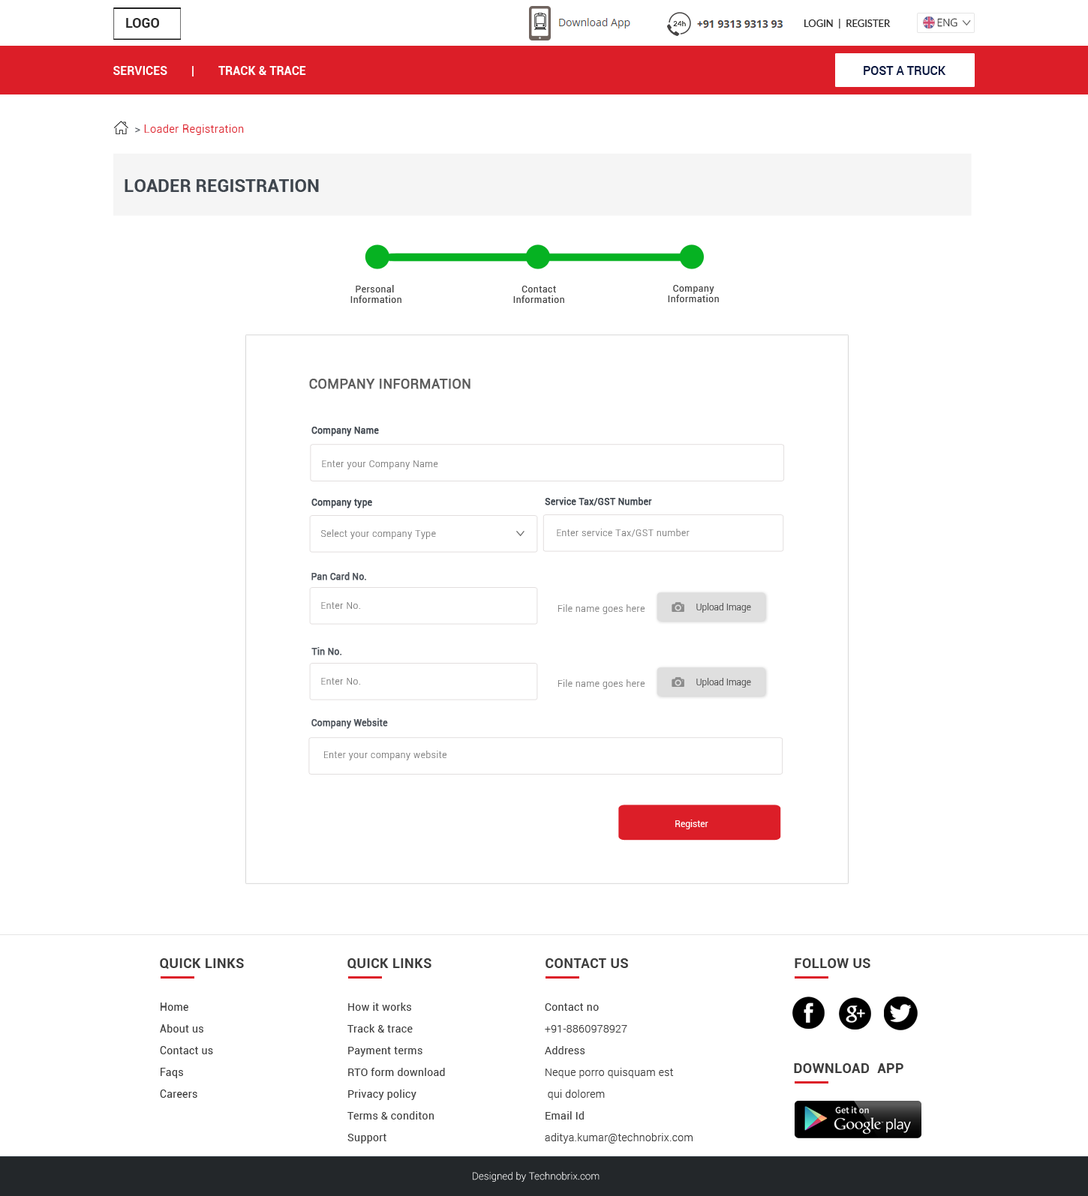
<style>
.page{position:relative;width:1088px;height:1196px;background:#ffffff}
.page>*{position:absolute;margin:0}
.t1{font:13.5px "Roboto-Bold";color:#2c2c2c}
.t2{font:9.8px "Lato-Regular";color:#2c2c2c;text-transform:uppercase}
.t3{font:10.5px "OpenSans-Light";color:#2c2c2c}
.t4{font:12px "Roboto-Bold";color:#ffffff;text-transform:uppercase}
.t5{font:12px "Roboto-Medium";color:#0d1a41}
.t6{font:10.5px "Roboto-Light";letter-spacing:0.05em;color:#dc1e28}
.t7{font:10.5px "Roboto-Light";letter-spacing:0.05em;color:#3f464e}
.t8{font:18px "Roboto-Bold";color:#3f464e;text-transform:uppercase}
.t9{font:9px/10.5px "Roboto-Regular";letter-spacing:0.05em;color:#444444}
.t10{font:13.5px "Roboto-Regular";color:#5c5c5c;font-weight:bold}
.t11{font:9px "Roboto-Regular";color:#3f464e;font-weight:bold}
.t12{font:9px "Roboto-Light";letter-spacing:0.05em;color:#777777}
.t13{font:9px "Roboto-Regular";color:#4c525a;font-weight:bold}
.t14{font:9px "Roboto-Light";color:#444444}
.t15{font:9px "Roboto-Regular";color:#ffffff}
.t16{font:13.5px "Roboto-Bold";letter-spacing:0.025em;color:#3c3c3c}
.t17{font:10.5px/21.8px "Roboto-Regular";letter-spacing:0.025em;color:#3c3c3c}
.t18{font:10.5px/21.8px "Roboto-Light";letter-spacing:0.025em;color:#3c3c3c}
.t19{font:9.8px "Roboto-Thin";letter-spacing:0.025em;color:#ffffff}
</style>
<div class="page">
<p class="t1" style="left:126px;top:18px;width:33px;height:10px">LOGO</p>
<p class="t2" style="left:804px;top:19px;width:86px;height:9px">Login  |  Register</p>
<p class="t3" style="left:937px;top:18px;width:20px;height:9px">ENG</p>
<p class="t4" style="left:113px;top:66px;width:193px;height:10px">Services        |        Track &amp; TraCe</p>
<p class="t5" style="left:863px;top:66px;width:83px;height:9px">POST A TRUCK</p>
<p class="t6" style="left:135px;top:124px;width:109px;height:11px"><span class="t7">&gt; </span>Loader Registration</p>
<p class="t8" style="left:124px;top:179px;width:195px;height:13px">Loader Registration</p>
<p class="t9" style="left:350px;top:285px;width:51px;height:18px;text-align:center">Personal <br>Information</p>
<p class="t9" style="left:513px;top:286px;width:51px;height:17px;text-align:center">Contact<br>Information</p>
<p class="t9" style="left:668px;top:285px;width:50px;height:17px;text-align:center">Company<br>Information</p>
<p class="t10" style="left:309px;top:379px;width:161px;height:10px">COMPANY INFORMATION</p>
<p class="t11" style="left:311px;top:427px;width:68px;height:9px">Company Name</p>
<p class="t12" style="left:322px;top:460px;width:116px;height:10px">Enter your Company Name</p>
<p class="t11" style="left:544px;top:497px;width:108px;height:9px">Service Tax/GST Number</p>
<p class="t11" style="left:311px;top:499px;width:61px;height:9px">Company type</p>
<p class="t12" style="left:321px;top:530px;width:115px;height:9px">Select your company Type</p>
<p class="t12" style="left:556px;top:529px;width:133px;height:8px">Enter service Tax/GST number</p>
<p class="t13" style="left:311px;top:572px;width:55px;height:8px">Pan Card No.</p>
<p class="t12" style="left:321px;top:602px;width:39px;height:7px">Enter No.</p>
<p class="t12" style="left:558px;top:604px;width:87px;height:10px">File name goes here</p>
<p class="t14" style="left:696px;top:603px;width:55px;height:10px">Upload Image</p>
<p class="t13" style="left:311px;top:647px;width:31px;height:9px">Tin No.</p>
<p class="t12" style="left:321px;top:678px;width:39px;height:7px">Enter No.</p>
<p class="t14" style="left:696px;top:678px;width:55px;height:10px">Upload Image</p>
<p class="t12" style="left:558px;top:680px;width:87px;height:9px">File name goes here</p>
<p class="t13" style="left:311px;top:718px;width:77px;height:11px">Company Website</p>
<p class="t12" style="left:324px;top:751px;width:123px;height:9px">Enter your company website</p>
<p class="t15" style="left:675px;top:820px;width:33px;height:10px">Register</p>
<p class="t16" style="left:160px;top:958px;width:84px;height:11px">QUICK LINKS</p>
<p class="t16" style="left:347px;top:958px;width:84px;height:11px">QUICK LINKS</p>
<p class="t16" style="left:545px;top:958px;width:83px;height:10px">CONTACT US</p>
<p class="t16" style="left:794px;top:958px;width:76px;height:10px">FOLLOW US</p>
<p class="t17" style="left:160px;top:1003px;width:53px;height:95px">Home<br>About us <br>Contact us<br>Faqs<br>Careers</p>
<p class="t17" style="left:347px;top:1003px;width:98px;height:141px">How it works<br>Track &amp; trace<br>Payment terms<br>RTO form download<br>Privacy policy <br>Terms &amp; conditon<br>Support</p>
<p class="t18" style="left:544px;top:1004px;width:148px;height:140px"><span class="t17">Contact no<br></span>+91-8860978927<br><span class="t17">Address<br></span>Neque porro quisquam est<br> qui dolorem<br><span class="t17">Email Id<br></span>aditya.kumar@technobrix.com</p>
<p class="t16" style="left:794px;top:1064px;width:109px;height:9px">DOWNLOAD  APP</p>
<p class="t19" style="left:472px;top:1172px;width:127px;height:10px">Designed by Technobrix.com</p>
</div>
